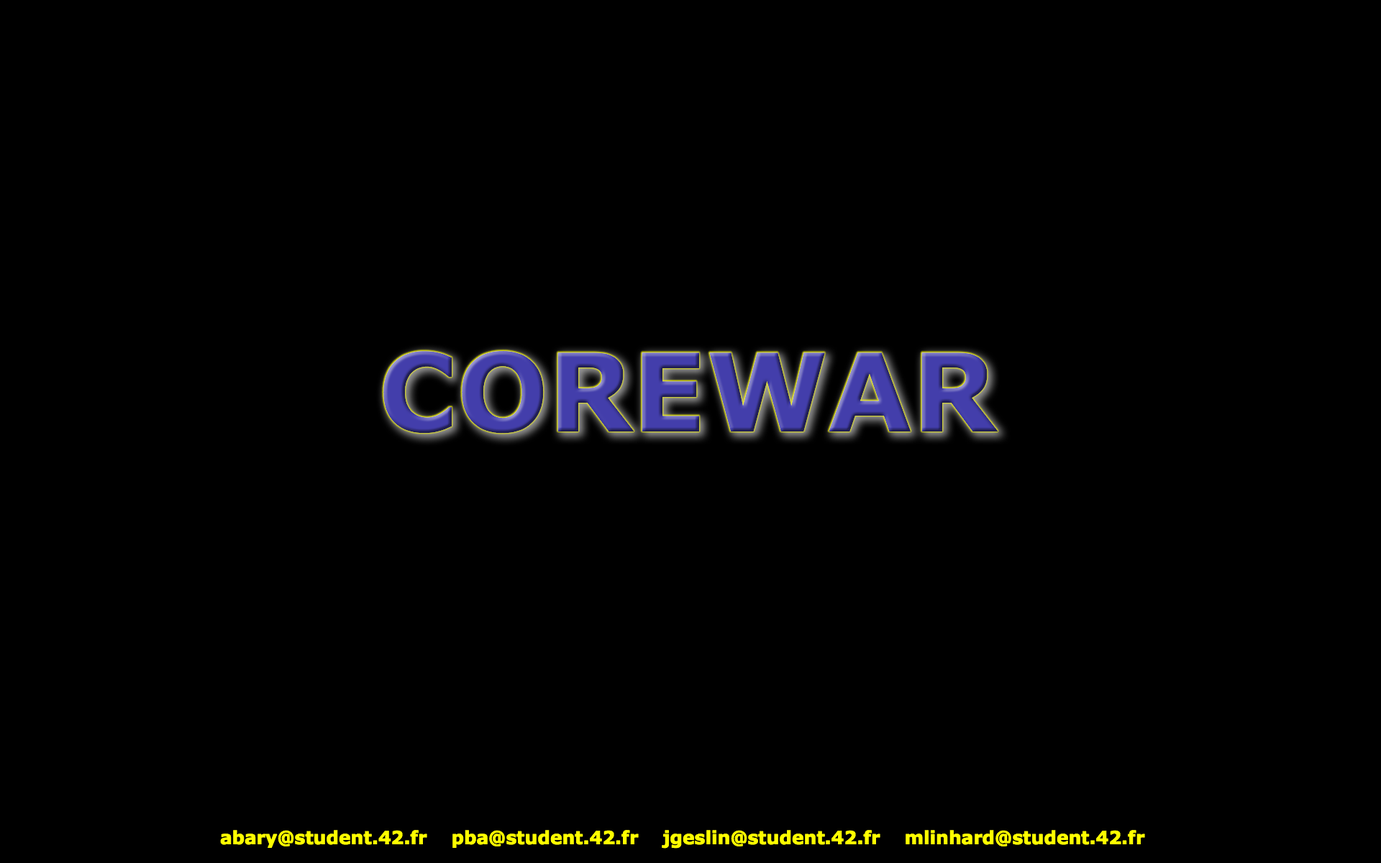
<style>
.page{position:relative;width:1381px;height:863px;background:#000000}
.page>*{position:absolute;margin:0}
.t1{font:107.9px "Verdana-Bold"}
.t2{font:18px "Verdana-Bold";color:#ffff00}
</style>
<div class="page">
<p class="t1" style="left:383px;top:351px;width:616px;height:83px">COREWAR</p>
<p class="t2" style="left:220px;top:830px;width:925px;height:19px">abary@student.42.fr    pba@student.42.fr    jgeslin@student.42.fr    mlinhard@student.42.fr</p>
</div>
